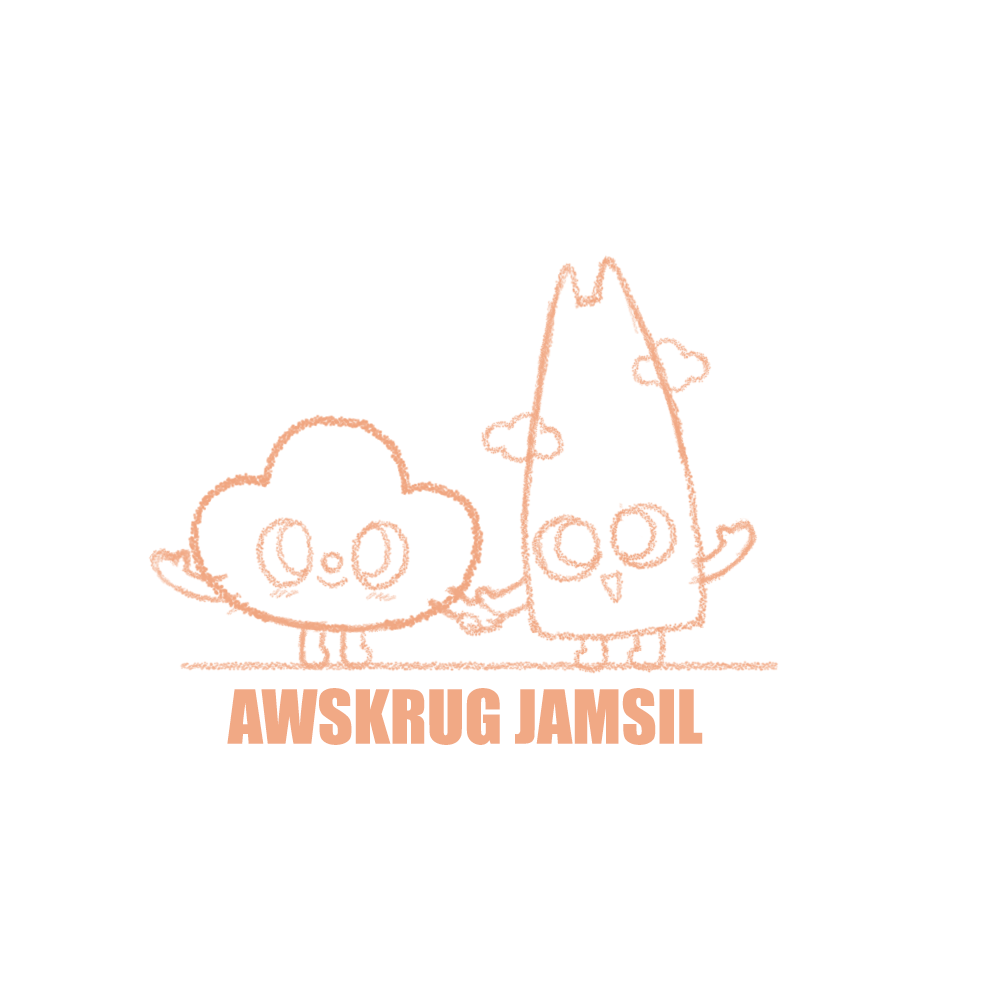
<style>
.page{position:relative;width:1000px;height:1000px;background:#ffffff}
.page>*{position:absolute;margin:0}
.t1{font:68.7px "Impact";color:#f1a985}
</style>
<div class="page">
<p class="t1" style="left:227px;top:688px;width:476px;height:57px">AWSKRUG JAMSIL</p>
</div>
